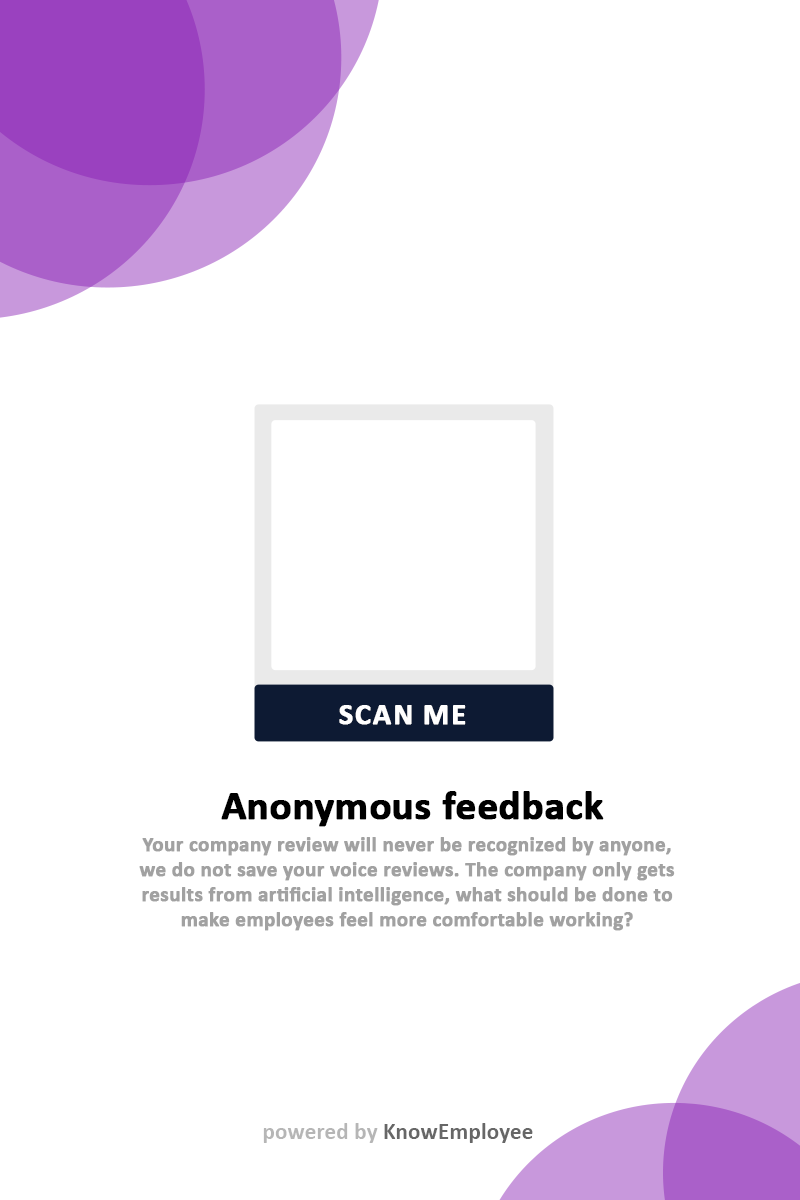
<style>
.page{position:relative;width:800px;height:1200px;background:#ffffff}
.page>*{position:absolute;margin:0}
.t1{font:30.2px "Calibri-Bold";color:#ffffff;text-transform:uppercase;font-weight:bold}
.t2{font:40.6px "Calibri-Bold";color:#000000;font-weight:bold}
.t3{font:20.8px "Calibri-Bold";color:#a1a1a1;font-weight:bold}
.t4{font:23.4px "Calibri-Bold";color:#676767}
.t5{font:23.4px "Calibri-Bold";color:#b6b6b6}
</style>
<div class="page">
<p class="t1" style="left:339px;top:705px;width:127px;height:20px">Scan me</p>
<p class="t2" style="left:221px;top:791px;width:383px;height:36px">Anonymous feedback</p>
<p class="t3" style="left:139px;top:837px;width:536px;height:94px;text-align:center">Your company review will never be recognized by anyone, we do not save your voice reviews. The company only gets results from artificial intelligence, what should be done to make employees feel more comfortable working?</p>
<p class="t4" style="left:263px;top:1123px;width:270px;height:20px"><span class="t5">powered by </span>KnowEmployee</p>
</div>
